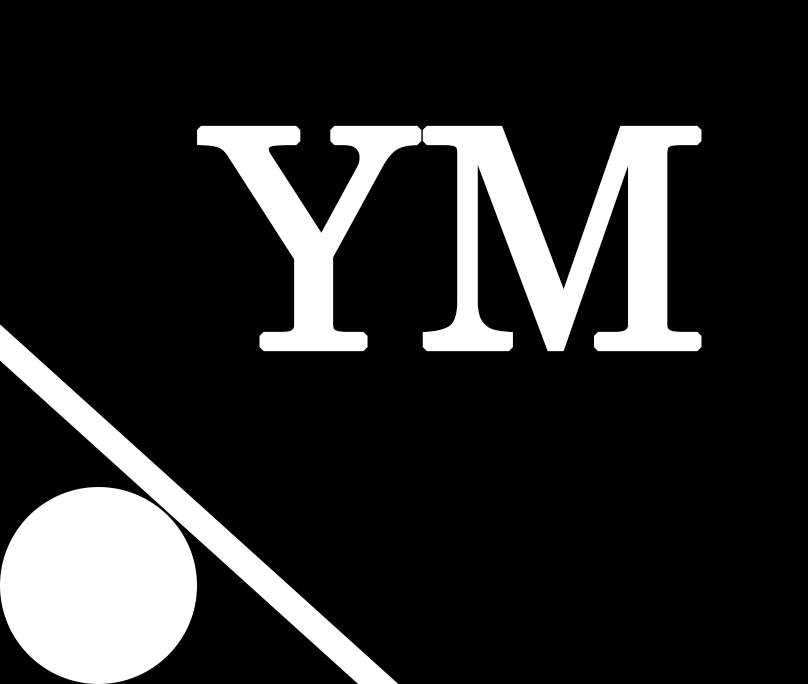
<style>
.page{position:relative;width:808px;height:684px;background:#000000}
.page>*{position:absolute;margin:0}
.t1{font:300px "Century";color:#ffffff;font-weight:bold}
</style>
<div class="page">
<p class="t1" style="left:197px;top:125px;width:505px;height:227px">YM</p>
</div>
